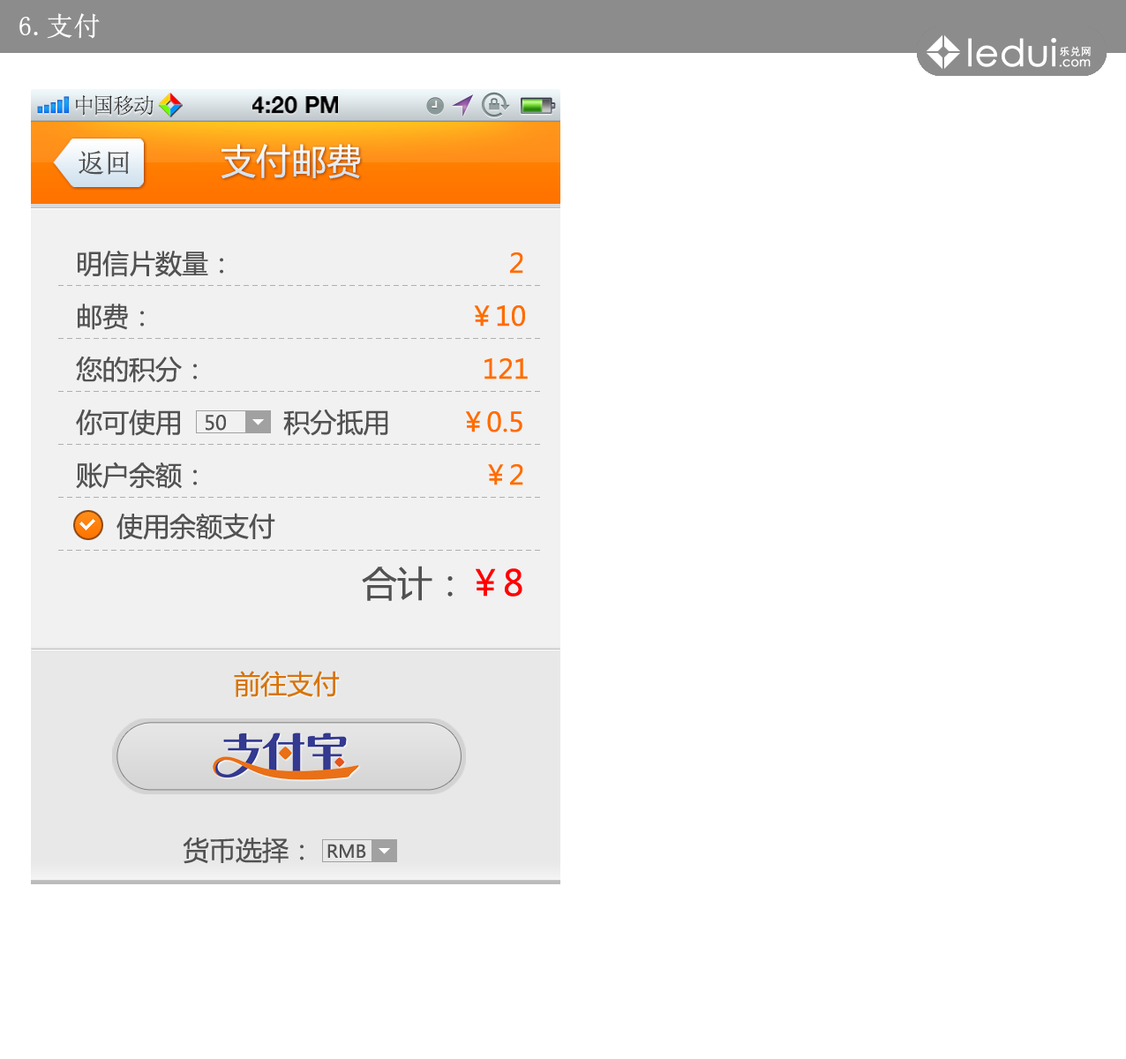
<style>
.page{position:relative;width:1126px;height:1059px;background:#ffffff}
.page>*{position:absolute;margin:0}
.t1{font:26.5px "SimSun";color:#ffffff;font-weight:bold}
.t2{font:21.5px "SimSun";color:#414141}
.t3{font:23.1px "HelveticaNeue-Bold";color:#000000;text-transform:uppercase}
.t4{font:35.3px "MicrosoftYaHei";color:#e9f1f7}
.t5{font:26.5px "SimSun";color:#525252;font-weight:bold}
.t6{font:26.5px/52.9px "MicrosoftYaHei";color:#525252}
.t7{font:26.5px/52.9px "MicrosoftYaHei";color:#ff6c00}
.t8{font:26.5px "MicrosoftYaHei";color:#525252}
.t9{font:35.3px "MicrosoftYaHei";color:#525252}
.t10{font:35.3px "MicrosoftYaHei";color:#ff0000}
.t11{font:26.5px "MicrosoftYaHei";color:#d7740a}
</style>
<div class="page">
<p class="t1" style="left:19px;top:13px;width:81px;height:26px">6.支付</p>
<p class="t2" style="left:76px;top:95px;width:78px;height:21px">中国移动</p>
<p class="t3" style="left:252px;top:96px;width:86px;height:18px">4:20 PM</p>
<p class="t4" style="left:221px;top:144px;width:140px;height:35px">支付邮费</p>
<p class="t5" style="left:79px;top:150px;width:50px;height:25px">返回</p>
<p class="t6" style="left:76px;top:251px;width:452px;height:238px">明信片数量：                                   <span class="t7">2</span><br>邮费：                                        <span class="t7">￥10<br></span>您的积分：                                   <span class="t7">121 </span><br>你可使用             积分抵用         <span class="t7">￥0.5 <br></span>账户余额：                              <span class="t7">     ￥2</span></p>
<p class="t8" style="left:116px;top:513px;width:159px;height:27px">使用余额支付</p>
<p class="t9" style="left:362px;top:566px;width:160px;height:35px">合计：<span class="t10">￥8</span></p>
<p class="t11" style="left:234px;top:671px;width:106px;height:26px">前往支付</p>
<p class="t8" style="left:183px;top:837px;width:121px;height:27px">货币选择：</p>
</div>
